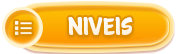
<style>
.page{position:relative;width:176px;height:54px}
.page>*{position:absolute;margin:0}
.t1{font:25px "Cartwheel";color:#ffffff}
</style>
<div class="page">
<p class="t1" style="left:68px;top:17px;width:65px;height:18px">NIVEIS</p>
</div>
